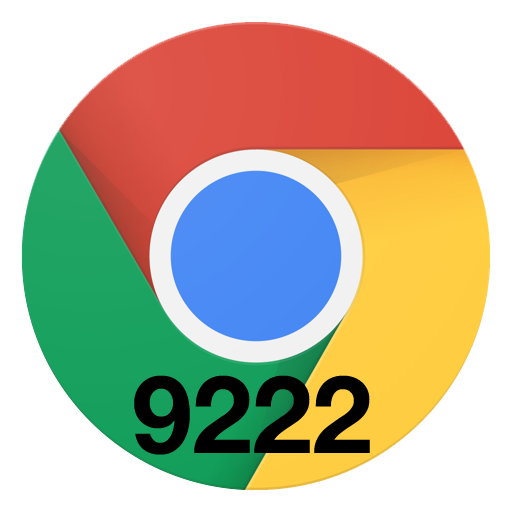
<style>
.page{position:relative;width:512px;height:512px;background:#ffffff}
.page>*{position:absolute;margin:0}
.t1{font:108px "HelveticaNeue-Bold";color:#000000}
</style>
<div class="page">
<p class="t1" style="left:134px;top:375px;width:236px;height:80px">9222</p>
</div>
